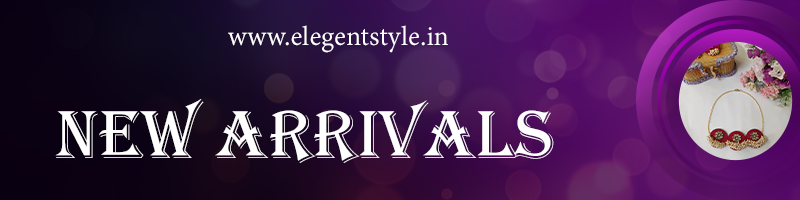
<style>
.page{position:relative;width:800px;height:200px}
.page>*{position:absolute;margin:0}
.t1{font:30px "AdobeDevanagari-Regular";color:#ffffff}
.t2{font:70.3px "Algerian";color:#ffffff}
</style>
<div class="page">
<p class="t1" style="left:228px;top:25px;width:220px;height:28px">www.elegentstyle.in</p>
<p class="t2" style="left:55px;top:99px;width:499px;height:64px">New Arrivals</p>
</div>
